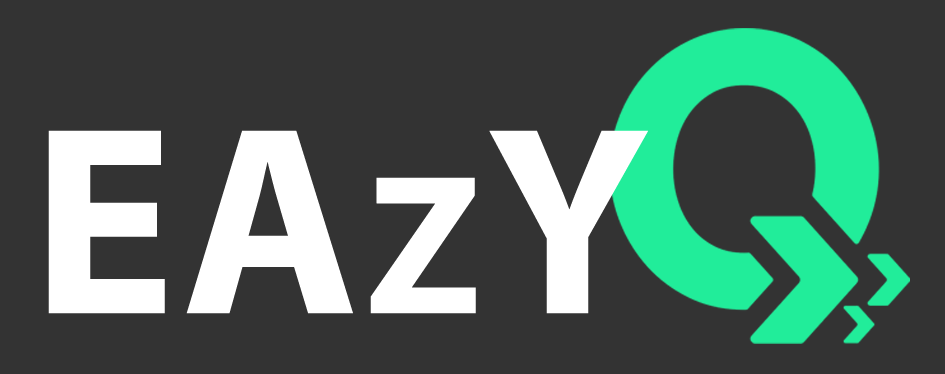
<style>
.page{position:relative;width:945px;height:374px;background:#333333}
.page>*{position:absolute;margin:0}
.t1{font:269.4px "MyriadPro-Bold";color:#ffffff;text-transform:uppercase;font-weight:bold}
.t2{font:200px "MyriadPro-Bold";color:#ffffff;text-transform:uppercase;font-weight:bold}
</style>
<div class="page">
<p class="t1" style="left:48px;top:130px;width:600px;height:184px">EA<span class="t2">Z</span>Y</p>
</div>
